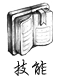
<style>
.page{position:relative;width:60px;height:80px;background:#ffffff}
.page>*{position:absolute;margin:0}
.t1{font:18px "STXingkaiSC-Light";letter-spacing:0.055em;color:#000000}
</style>
<div class="page">
<p class="t1" style="left:13px;top:59px;width:34px;height:17px">技能</p>
</div>
